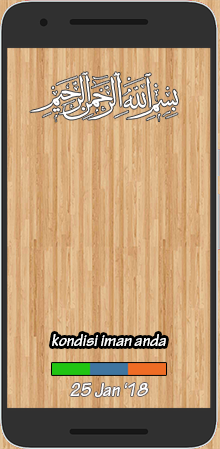
<style>
.page{position:relative;width:220px;height:449px}
.page>*{position:absolute;margin:0}
.t1{font:17.7px "TektonPro-BoldObl";color:#ffffff}
.t2{font:18.6px "TektonPro-BoldObl";color:#ffffff}
</style>
<div class="page">
<p class="t1" style="left:52px;top:334px;width:114px;height:12px">kondisi iman anda</p>
<p class="t2" style="left:70px;top:383px;width:78px;height:14px">25 Jan ‘18</p>
</div>
